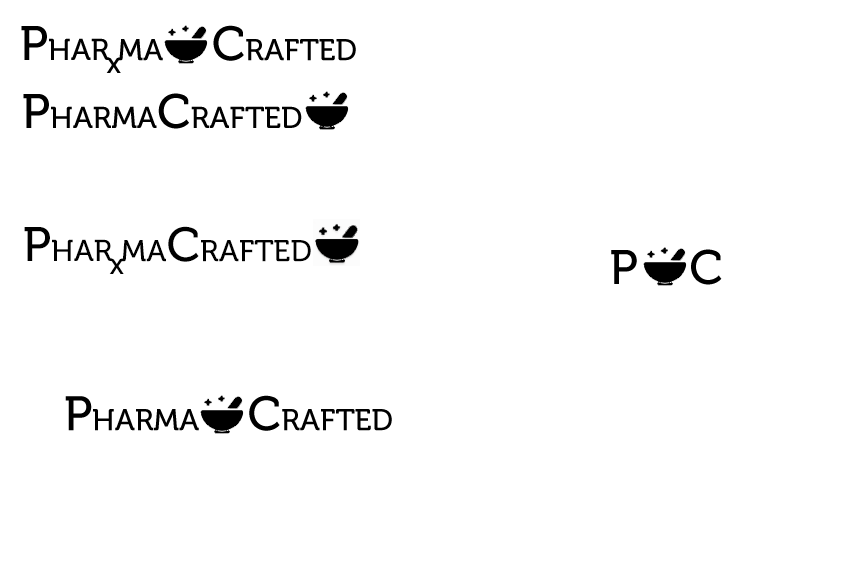
<style>
.page{position:relative;width:849px;height:565px;background:#ffffff}
.page>*{position:absolute;margin:0}
.t1{font:30px "Museo-500";color:#000000}
.t2{font:48px "Museo-500";color:#000000}
</style>
<div class="page">
<p class="t1" style="left:21px;top:26px;width:88px;height:34px"><span class="t2">P</span>HAR</p>
<p class="t1" style="left:118px;top:25px;width:238px;height:36px">MA      <span class="t2">C</span>RAFTED</p>
<p class="t1" style="left:106px;top:57px;width:15px;height:16px">x</p>
<p class="t1" style="left:23px;top:93px;width:279px;height:36px"><span class="t2">P</span>HARMA<span class="t2">C</span>RAFTED</p>
<p class="t1" style="left:65px;top:395px;width:327px;height:36px"><span class="t2">P</span>HARMA      <span class="t2">C</span>RAFTED</p>
</div>
